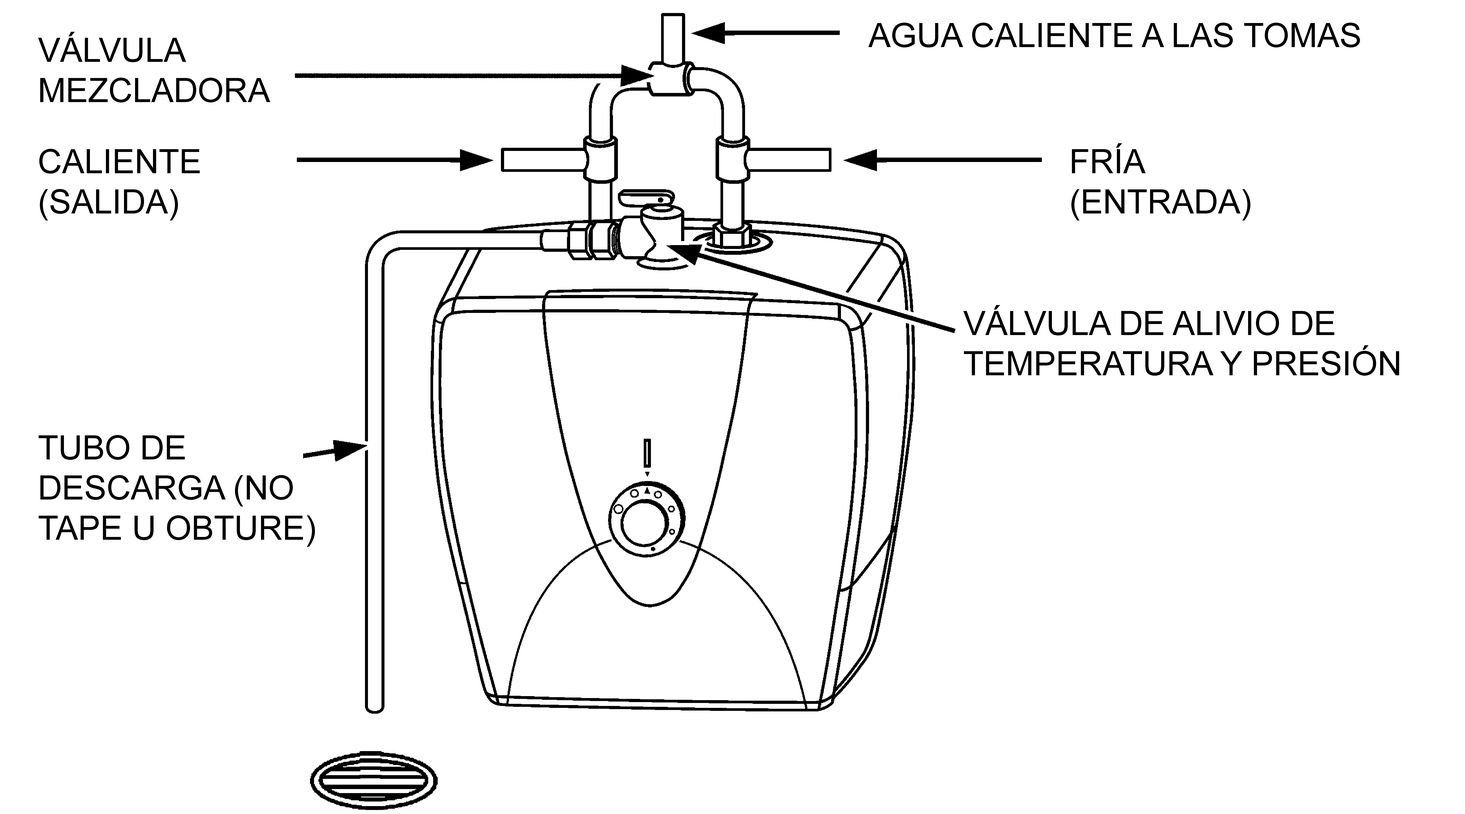
<style>
.page{position:relative;width:1465px;height:814px;background:#ffffff}
.page>*{position:absolute;margin:0}
.t1{font:33.5px "ArialMT";color:#000000}
</style>
<div class="page">
<p class="t1" style="left:868px;top:23px;width:492px;height:24px">AGUA CALIENTE A LAS TOMAS</p>
<p class="t1" style="left:38px;top:32px;width:232px;height:70px">VÁLVULA MEZCLADORA</p>
<p class="t1" style="left:39px;top:149px;width:161px;height:71px">CALIENTE<br>(SALIDA)</p>
<p class="t1" style="left:1072px;top:143px;width:179px;height:77px">FRÍA (ENTRADA)</p>
<p class="t1" style="left:964px;top:305px;width:435px;height:71px">VÁLVULA DE ALIVIO DE TEMPERATURA Y PRESIÓN</p>
<p class="t1" style="left:39px;top:435px;width:276px;height:112px">TUBO DE DESCARGA (NO TAPE U OBTURE)</p>
</div>
